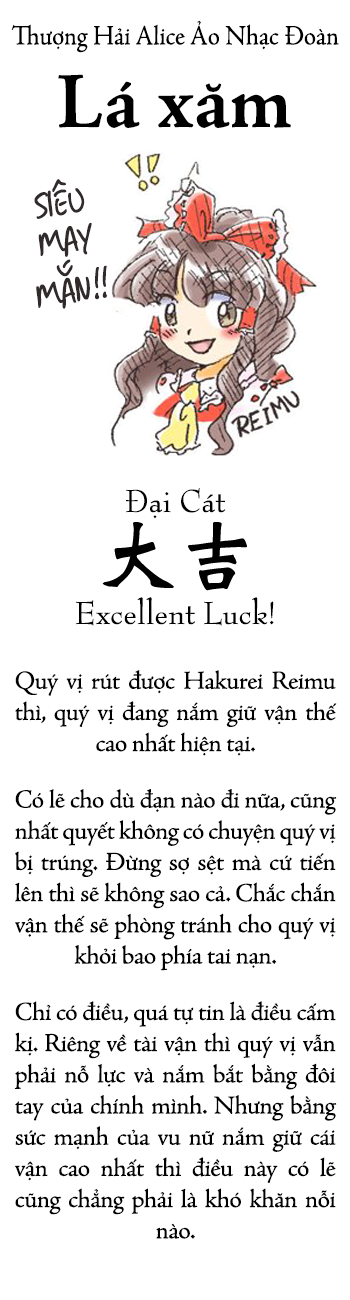
<style>
.page{position:relative;width:350px;height:1300px;background:#ffffff}
.page>*{position:absolute;margin:0}
.t1{font:28px "SVN-AdobeJenson";color:#000000;scale:0.9 1}
.t2{font:80px "SVN-AdobeJensonBold";color:#000000}
.t3{font:40px/37.7px "MTOGrungeSans";color:#302a2a;text-transform:uppercase;font-weight:bold}
.t4{font:40px/50.7px "MTOGrungeSans";color:#302a2a;text-transform:uppercase;font-weight:bold}
.t5{font:40px/48.7px "MTOGrungeSans";color:#302a2a;text-transform:uppercase;font-weight:bold}
.t6{font:34.3px "BernhardModernStd-Roman";color:#000000}
.t7{font:34.3px/20px "BernhardModernStd-Roman";color:#000000}
.t8{font:80px "DFGiHi-W7-WINP-RKSJ-H";color:#000000}
.t9{font:26px "SVN-AdobeJenson";letter-spacing:-0.02em;color:#000000}
</style>
<div class="page">
<p class="t1" style="left:11px;top:20px;width:328px;height:33px">Thượng Hải Alice Ảo Nhạc Đoàn</p>
<p class="t2" style="left:58px;top:74px;width:233px;height:54px">Lá xăm</p>
<p class="t3" style="left:34px;top:179px;width:73px;height:130px;text-align:center;rotate:-9deg">Siêu<br>May<br><span class="t4">Mắn</span><span class="t5">!!</span></p>
<p class="t6" style="left:126px;top:488px;width:100px;height:31px;text-align:center">Đai Cát<br><span class="t7">˙</span></p>
<p class="t8" style="left:102px;top:522px;width:145px;height:69px">大吉</p>
<p class="t6" style="left:75px;top:597px;width:199px;height:29px">Excellent Luck!</p>
<p class="t9" style="left:14px;top:670px;width:323px;height:569px;text-align:justify">Quý vị rút được Hakurei Reimu thì, quý vị đang nắm giữ vận thế cao nhất hiện tại.<br><br>Có lẽ cho dù đạn nào đi nữa, cũng nhất quyết không có chuyện quý vị bị trúng. Đừng sợ sệt mà cứ tiến lên thì sẽ không sao cả. Chắc chắn vận thế sẽ phòng tránh cho quý vị khỏi bao phía tai nạn.<br><br>Chỉ có điều, quá tự tin là điều cấm kị. Riêng về tài vận thì quý vị vẫn phải nỗ lực và nắm bắt bằng đôi tay của chính mình. Nhưng bằng sức mạnh của vu nữ nắm giữ cái vận cao nhất thì điều này có lẽ cũng chẳng phải là khó khăn nỗi nào.</p>
</div>
